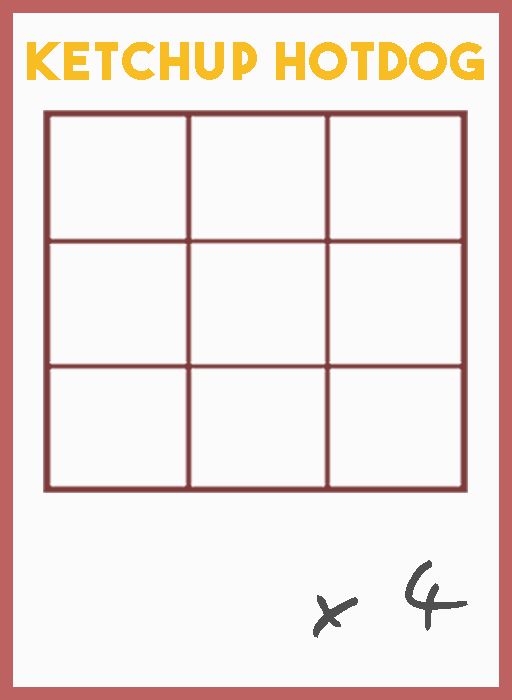
<style>
.page{position:relative;width:512px;height:700px;background:#fbfbfb}
.page>*{position:absolute;margin:0}
.t1{font:52.3px "TheBoldFont";letter-spacing:0.05em;color:#f7bd22}
.t2{font:106.1px "EasySpeech";letter-spacing:0.05em;color:#4f4f4f}
</style>
<div class="page">
<p class="t1" style="left:27px;top:42px;width:457px;height:38px">ketchup Hotdog</p>
<p class="t2" style="left:313px;top:560px;width:155px;height:78px">x 4</p>
</div>
